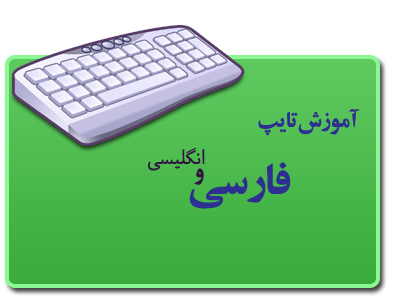
<style>
.page{position:relative;width:400px;height:300px;background:#ffffff}
.page>*{position:absolute;margin:0}
.t1{font:24px "BZarBold";letter-spacing:-0.05em;color:#2e3091}
.t2{font:24px "BRoya";color:#311540}
.t3{font:48px "BZarBold";letter-spacing:-0.05em;color:#2e3091}
.t4{font:24px "BZarBold";letter-spacing:-0.05em;color:#311540}
</style>
<div class="page">
<p class="t1" style="left:258px;top:109px;width:102px;height:27px">آموزش تايپ</p>
<p class="t2" style="left:148px;top:147px;width:57px;height:24px">انگليسي</p>
<p class="t3" style="left:189px;top:162px;width:102px;height:47px">فارسي</p>
<p class="t4" style="left:194px;top:168px;width:10px;height:17px">و</p>
</div>
